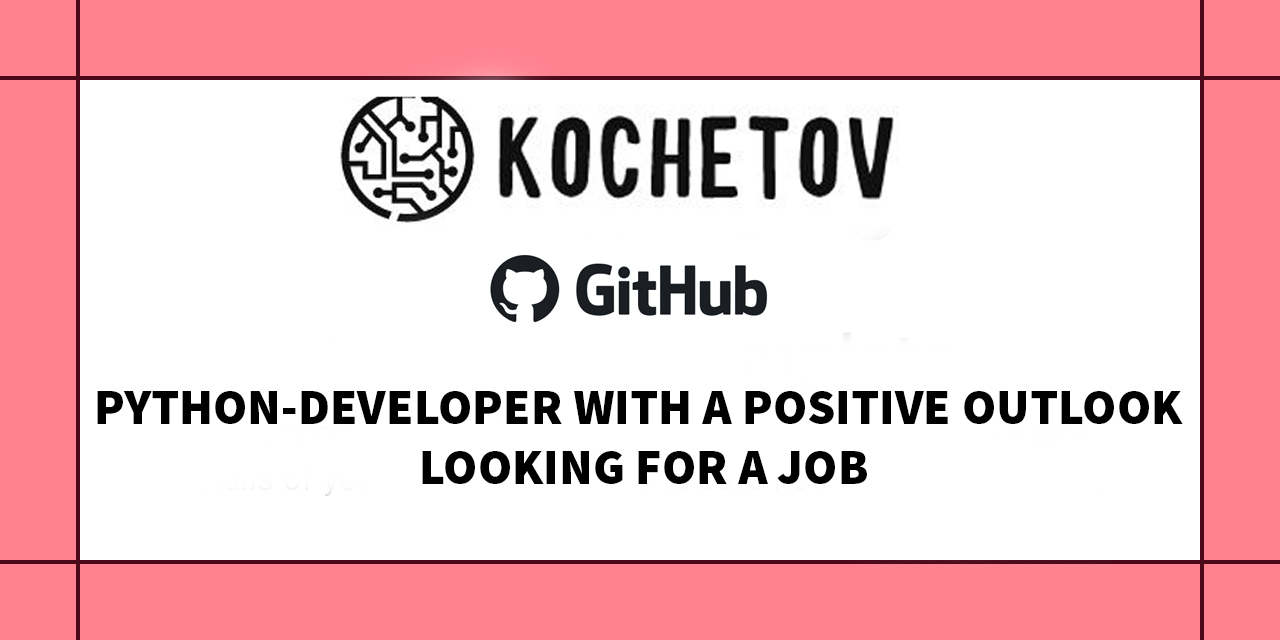
<style>
.page{position:relative;width:1280px;height:640px;background:#ffffff}
.page>*{position:absolute;margin:0}
.t1{font:49.9px "SourceSansPro-Black";color:#000000;text-transform:uppercase}
</style>
<div class="page">
<p class="t1" style="left:97px;top:391px;width:1086px;height:93px;text-align:center">Python-developer with a positive outlook<br> looking for a job</p>
</div>
